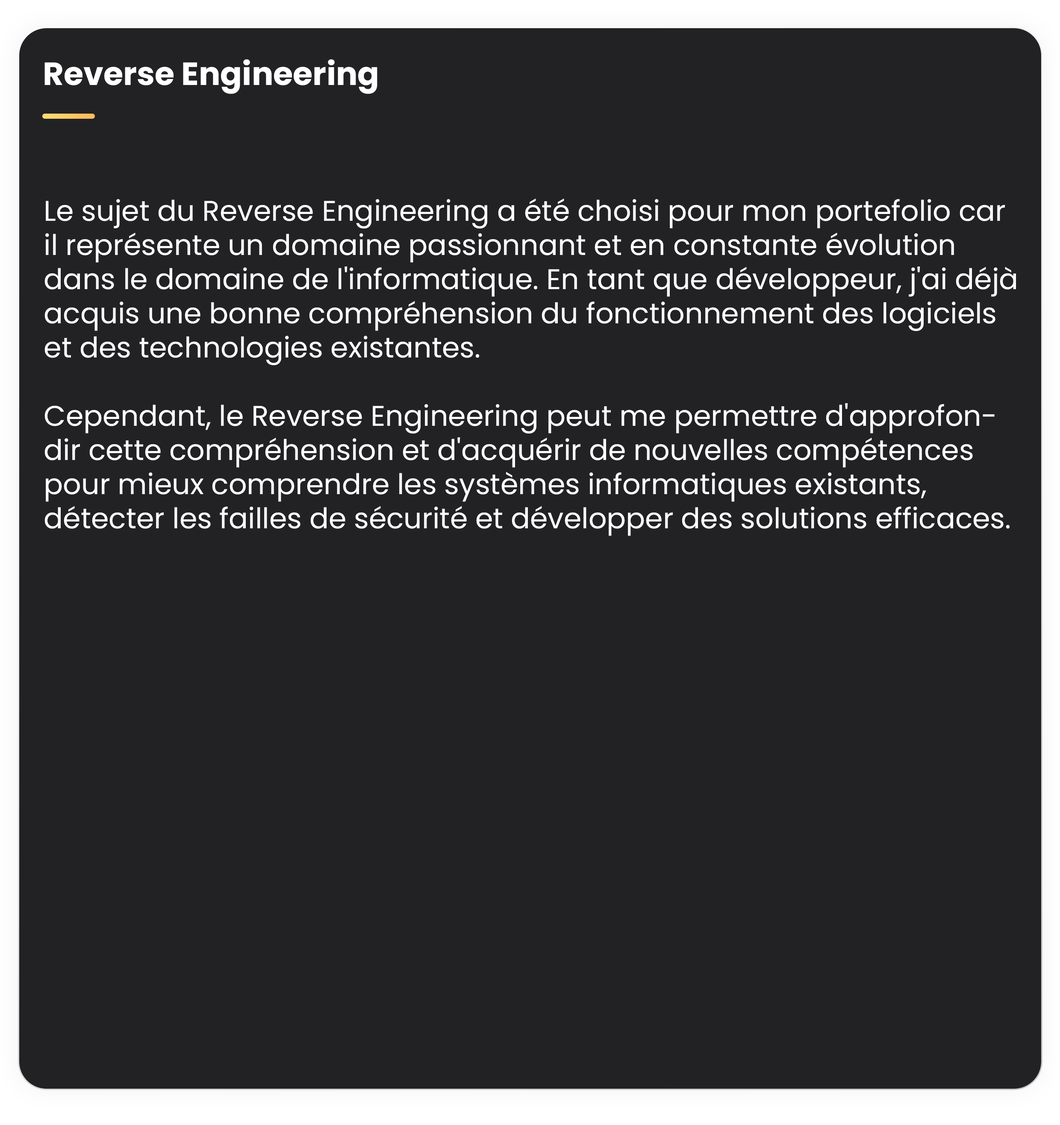
<style>
.page{position:relative;width:1060px;height:1125px;background:#222224}
.page>*{position:absolute;margin:0}
.t1{font:32px "Poppins-Bold";color:#ffffff}
.t2{font:28.5px "Poppins-Regular";color:#ffffff}
</style>
<div class="page">
<p class="t1" style="left:44px;top:59px;width:333px;height:35px">Reverse Engineering</p>
<p class="t2" style="left:44px;top:199px;width:972px;height:337px">Le sujet du Reverse Engineering a été choisi pour mon portefolio car il représente un domaine passionnant et en constante évolution dans le domaine de l'informatique. En tant que développeur, j'ai déjà acquis une bonne compréhension du fonctionnement des logiciels et des technologies existantes. <br><br>Cependant, le Reverse Engineering peut me permettre d'approfondir cette compréhension et d'acquérir de nouvelles compétences pour mieux comprendre les systèmes informatiques existants, <br>détecter les failles de sécurité et développer des solutions efficaces.</p>
</div>
